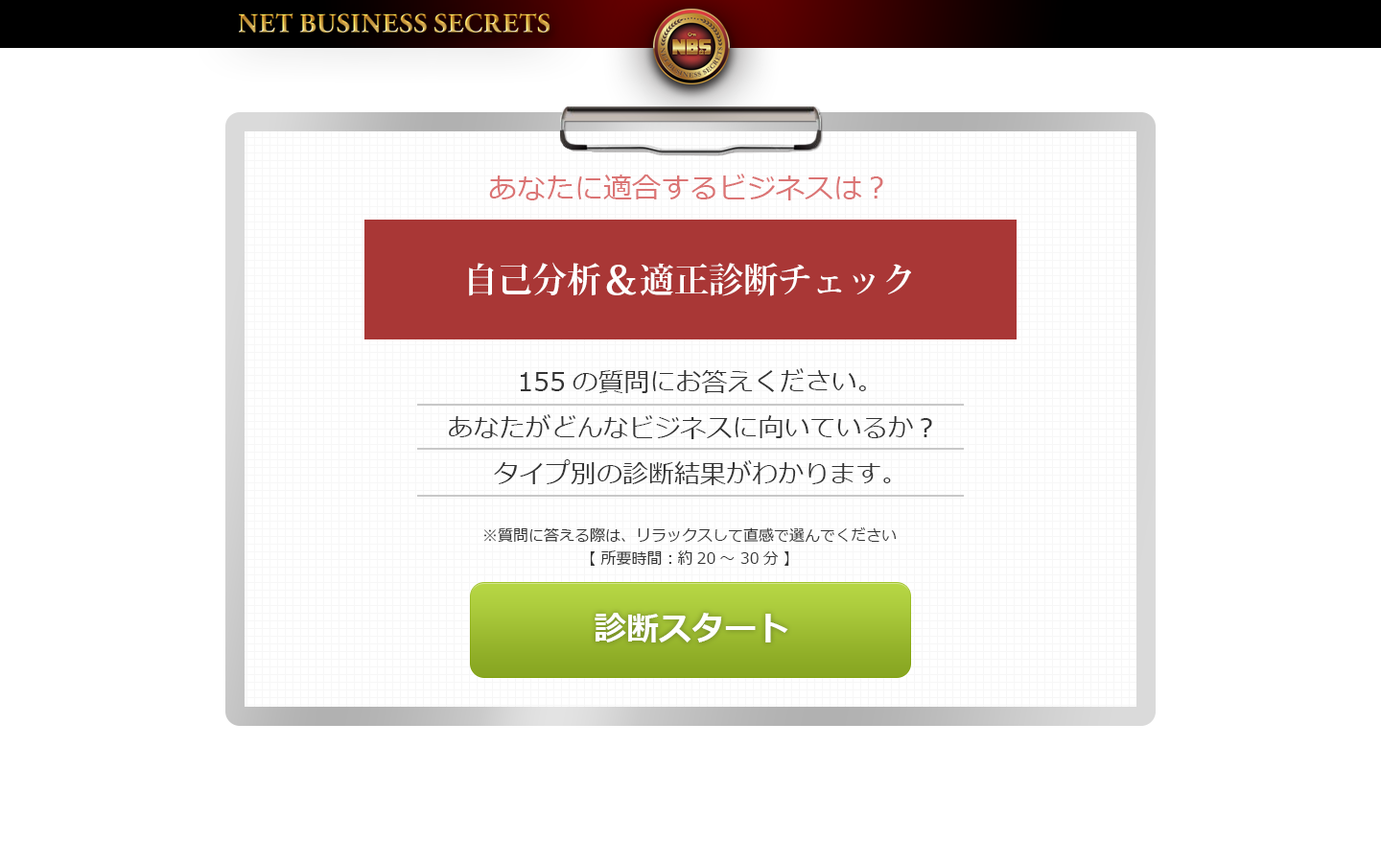
<style>
.page{position:relative;width:1381px;height:863px;background:#ffffff}
.page>*{position:absolute;margin:0}
.t1{font:28.8px "Meiryo";color:#db7474}
.t2{font:34.5px "KozMinPr6N-Bold";color:#ffffff}
.t3{font:41.4px "KozMinPr6N-Bold";color:#ffffff}
.t4{font:25.9px/46px "Meiryo";color:#333333}
.t5{font:15.3px/23px "Meiryo";color:#333333}
.t6{font:32.6px "Meiryo-Bold";color:#ffffff}
</style>
<div class="page">
<p class="t1" style="left:489px;top:174px;width:394px;height:26px">あなたに適合するビジネスは？</p>
<p class="t2" style="left:469px;top:262px;width:442px;height:34px">自己分析<span class="t3">＆</span>適正診断チェック</p>
<p class="t4" style="left:449px;top:368px;width:483px;height:117px;text-align:center">155の質問にお答えください。<br>あなたがどんなビジネスに向いているか？<br>タイプ別の診断結果がわかります。</p>
<p class="t5" style="left:483px;top:528px;width:414px;height:38px;text-align:center">※質問に答える際は、リラックスして直感で選んでください<br>【 所要時間：約20～ 30分 】</p>
<p class="t6" style="left:595px;top:613px;width:193px;height:30px">診断スタート</p>
</div>
